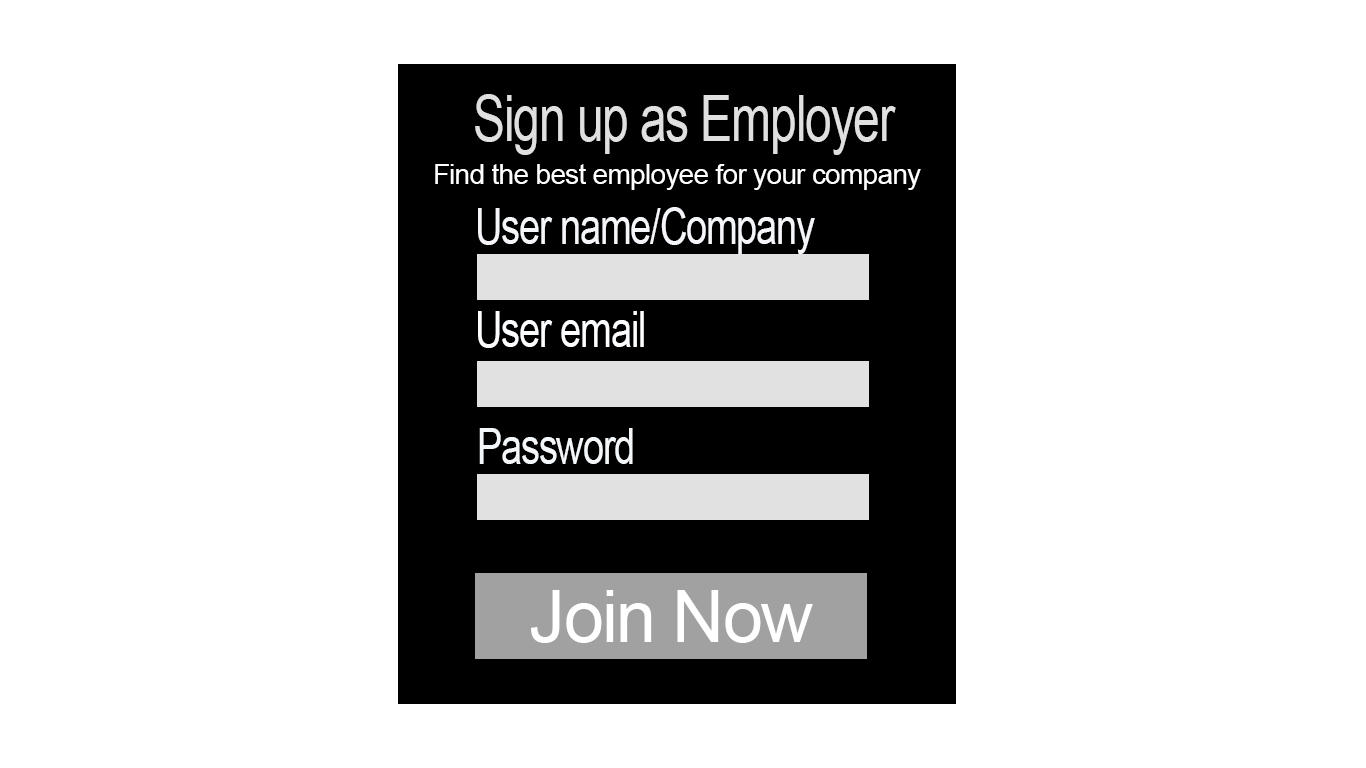
<style>
.page{position:relative;width:1366px;height:768px;background:#ffffff}
.page>*{position:absolute;margin:0}
.t1{font:64px "ArialMT";letter-spacing:-0.025em;color:#e0e0e0;scale:0.75 1}
.t2{font:28px "ArialMT";letter-spacing:-0.025em;color:#ffffff}
.t3{font:50px "ArialMT";letter-spacing:-0.025em;color:#f4f6f9;scale:0.75 1}
.t4{font:50px "ArialMT";letter-spacing:-0.025em;color:#fdfeff;scale:0.75 1}
.t5{font:50px "ArialMT";letter-spacing:-0.025em;color:#f4f7fa;scale:0.75 1}
.t6{font:72px "ArialMT";letter-spacing:-0.025em;color:#ffffff}
</style>
<div class="page">
<p class="t1" style="left:475px;top:94px;width:421px;height:61px">Sign up as Employer</p>
<p class="t2" style="left:435px;top:164px;width:486px;height:26px">Find the best employee for your company</p>
<p class="t3" style="left:478px;top:207px;width:337px;height:47px">User name/Company</p>
<p class="t4" style="left:478px;top:311px;width:166px;height:37px">User email</p>
<p class="t5" style="left:479px;top:428px;width:154px;height:36px">Password</p>
<p class="t6" style="left:531px;top:590px;width:282px;height:53px">Join Now</p>
</div>
